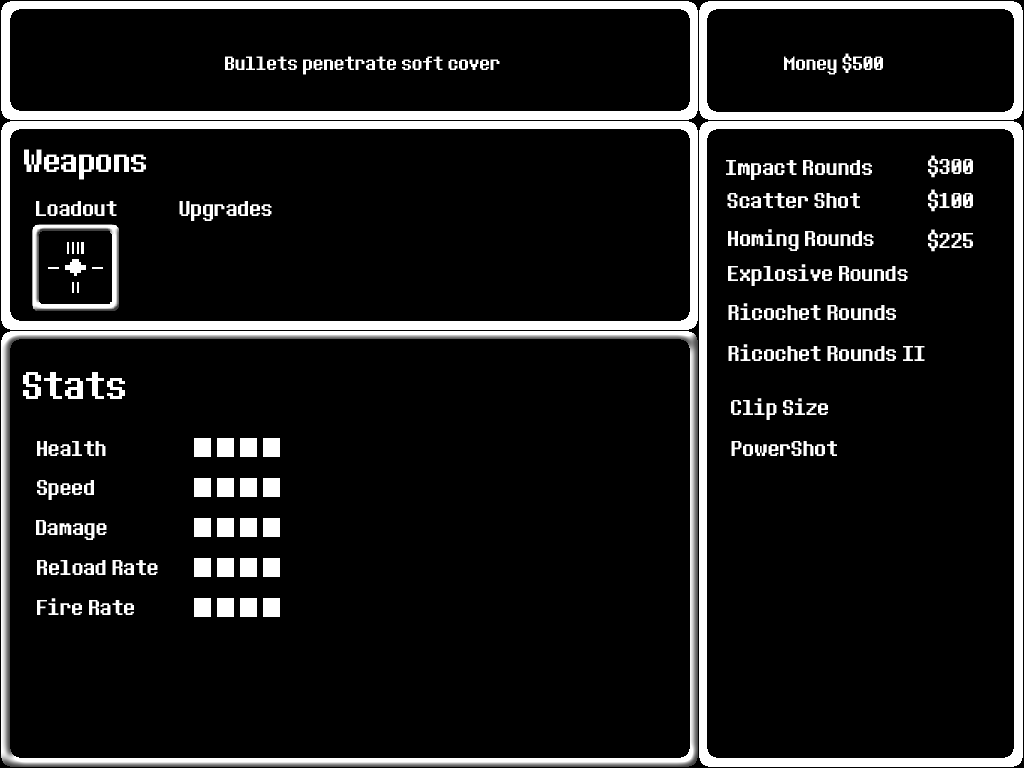
<style>
.page{position:relative;width:1024px;height:768px;background:#000000}
.page>*{position:absolute;margin:0}
.t1{font:24px "8bitoperator-JVE";color:#ffffff}
.t2{font:40px "8bitoperator-JVE";color:#ffffff}
.t3{font:26.8px "8bitoperator-JVE";color:#ffffff}
.t4{font:48px "8bitoperator-JVE";color:#ffffff}
</style>
<div class="page">
<p class="t1" style="left:784px;top:53px;width:99px;height:22px">Money $500</p>
<p class="t1" style="left:225px;top:56px;width:275px;height:19px">Bullets penetrate soft cover</p>
<p class="t2" style="left:24px;top:149px;width:122px;height:31px">Weapons</p>
<p class="t3" style="left:726px;top:160px;width:146px;height:20px">Impact Rounds</p>
<p class="t3" style="left:928px;top:155px;width:45px;height:23px">$300</p>
<p class="t3" style="left:727px;top:193px;width:133px;height:15px">Scatter Shot</p>
<p class="t3" style="left:928px;top:189px;width:45px;height:23px">$100</p>
<p class="t3" style="left:36px;top:201px;width:81px;height:15px">Loadout</p>
<p class="t3" style="left:179px;top:201px;width:93px;height:20px">Upgrades</p>
<p class="t3" style="left:728px;top:229px;width:146px;height:22px">Homing Rounds</p>
<p class="t3" style="left:928px;top:229px;width:45px;height:23px">$225</p>
<p class="t3" style="left:728px;top:264px;width:180px;height:22px">Explosive Rounds</p>
<p class="t3" style="left:728px;top:303px;width:168px;height:17px">Ricochet Rounds</p>
<p class="t3" style="left:728px;top:344px;width:197px;height:17px">Ricochet Rounds II</p>
<p class="t4" style="left:23px;top:372px;width:102px;height:27px">Stats</p>
<p class="t3" style="left:731px;top:398px;width:97px;height:22px">Clip Size</p>
<p class="t3" style="left:37px;top:441px;width:69px;height:15px">Health</p>
<p class="t3" style="left:731px;top:441px;width:106px;height:15px">PowerShot</p>
<p class="t3" style="left:37px;top:480px;width:57px;height:20px">Speed</p>
<p class="t3" style="left:36px;top:520px;width:71px;height:20px">Damage</p>
<p class="t3" style="left:37px;top:560px;width:121px;height:15px">Reload Rate</p>
<p class="t3" style="left:37px;top:598px;width:97px;height:17px">Fire Rate</p>
</div>
